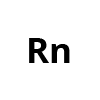
<style>
.page{position:relative;width:100px;height:100px;background:#ffffff}
.page>*{position:absolute;margin:0}
.t1{font:35px "OpenSans-Bold";color:#000000}
</style>
<div class="page">
<p class="t1" style="left:29px;top:38px;width:41px;height:25px">Rn</p>
</div>
